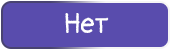
<style>
.page{position:relative;width:170px;height:50px;background:#594cad}
.page>*{position:absolute;margin:0}
.t1{font:28px "Pangolin-Regular";color:#ffffff}
</style>
<div class="page">
<p class="t1" style="left:65px;top:13px;width:44px;height:20px">Нет</p>
</div>
